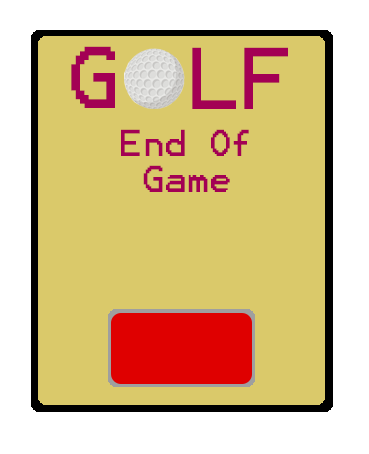
<style>
.page{position:relative;width:369px;height:454px;background:#dac96a}
.page>*{position:absolute;margin:0}
.t1{font:70px "Terminal";color:#a30054}
.t2{font:30px "Terminal";color:#a30054}
</style>
<div class="page">
<p class="t1" style="left:71px;top:46px;width:44px;height:62px">G</p>
<p class="t1" style="left:192px;top:47px;width:44px;height:62px">L</p>
<p class="t1" style="left:244px;top:47px;width:44px;height:62px">F</p>
<p class="t2" style="left:121px;top:129px;width:128px;height:63px">End Of<br> Game</p>
</div>
